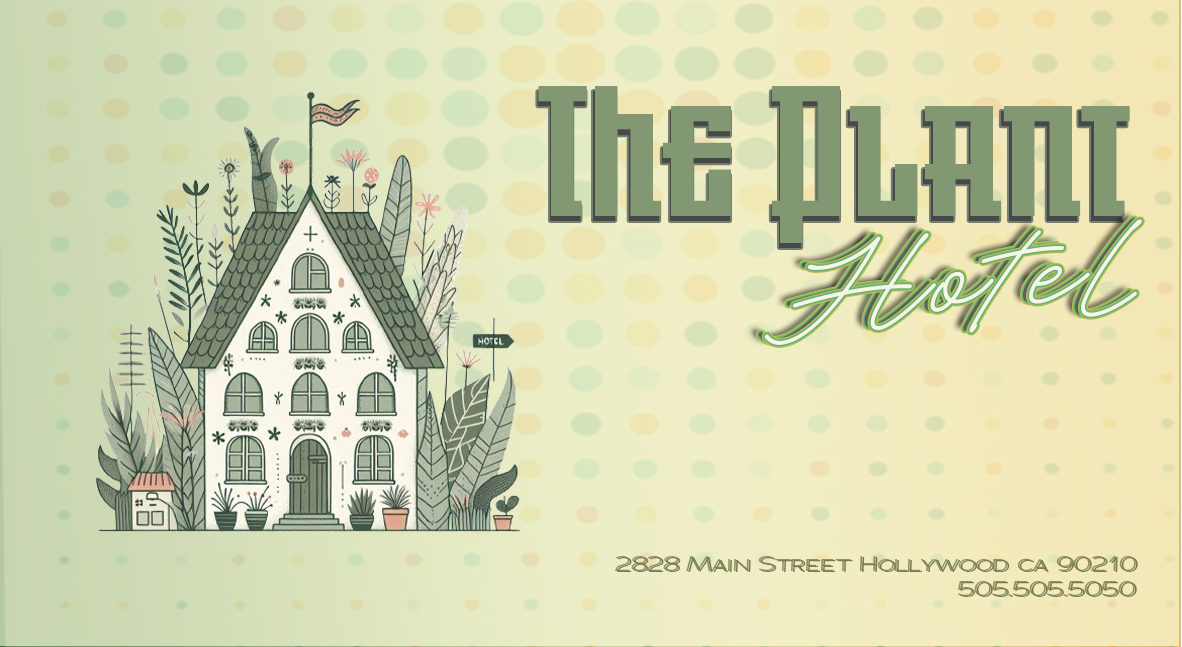
<style>
.page{position:relative;width:1182px;height:647px}
.page>*{position:absolute;margin:0}
.t1{font:169.7px "Johannes-Regular";color:#829872;font-variant:small-caps}
.t2{font:169.2px "Johannes-Regular";color:#829872;font-variant:small-caps}
.t3{font:195.2px "AdventuresUnlimitedScript-Regular";letter-spacing:0.05em}
.t4{font:195.2px "AdventuresUnlimitedScript-Regular";letter-spacing:0.05em;color:#faf4e6}
.t5{font:21.1px "Adrianna-Light";color:#787b54;font-variant:small-caps;scale:1.36 1}
</style>
<div class="page">
<p class="t1" style="left:538px;top:86px;width:592px;height:157px">The Plant</p>
<p class="t2" style="left:537px;top:91px;width:590px;height:157px">The Plant</p>
<p class="t3" style="left:758px;top:218px;width:378px;height:125px;rotate:-4deg">Hotel</p>
<p class="t4" style="left:764px;top:219px;width:378px;height:126px;rotate:-4deg">Hotel</p>
<p class="t5" style="left:617px;top:557px;width:521px;height:40px;text-align:right">2828 Main Street Hollywood ca 90210<br>505.505.5050</p>
</div>
